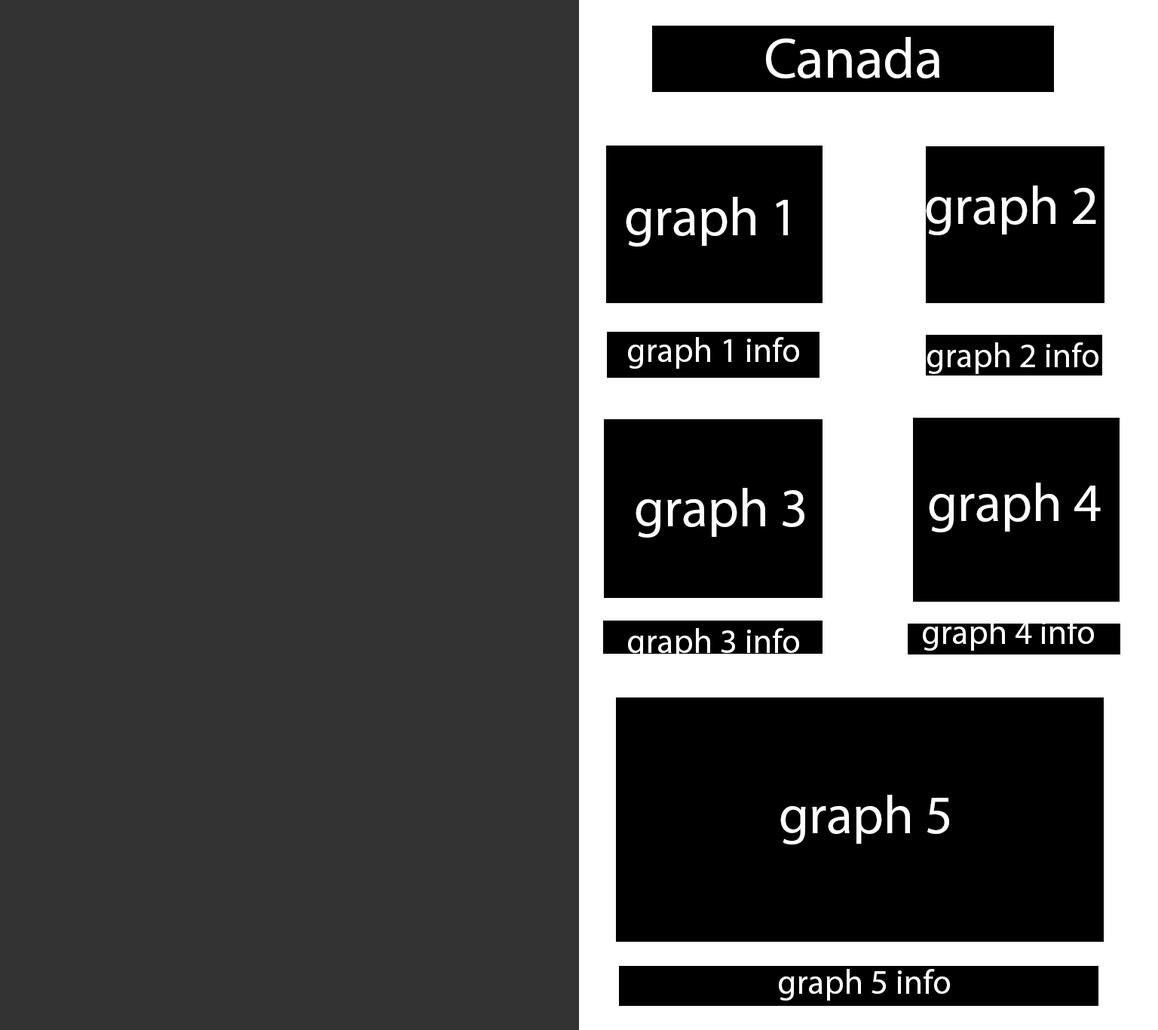
<style>
.page{position:relative;width:1158px;height:1030px;background:#333333}
.page>*{position:absolute;margin:0}
.t1{font:57.1px "MyriadPro-Regular";color:#ffffff}
.t2{font:54.3px "MyriadPro-Regular";color:#ffffff}
.t3{font:34.5px "MyriadPro-Regular";color:#ffffff}
</style>
<div class="page">
<p class="t1" style="left:766px;top:37px;width:173px;height:41px">Canada</p>
<p class="t2" style="left:926px;top:185px;width:170px;height:50px">graph 2</p>
<p class="t2" style="left:626px;top:197px;width:162px;height:50px">graph 1</p>
<p class="t3" style="left:628px;top:337px;width:171px;height:32px">graph 1 info</p>
<p class="t3" style="left:927px;top:342px;width:171px;height:32px">graph 2 info</p>
<p class="t2" style="left:929px;top:482px;width:172px;height:50px">graph 4</p>
<p class="t2" style="left:636px;top:488px;width:168px;height:50px">graph 3</p>
<p class="t3" style="left:628px;top:628px;width:171px;height:32px">graph 3 info</p>
<p class="t3" style="left:923px;top:619px;width:171px;height:32px">graph 4 info</p>
<p class="t2" style="left:780px;top:795px;width:169px;height:49px">graph 5</p>
<p class="t3" style="left:779px;top:969px;width:171px;height:31px">graph 5 info</p>
</div>
